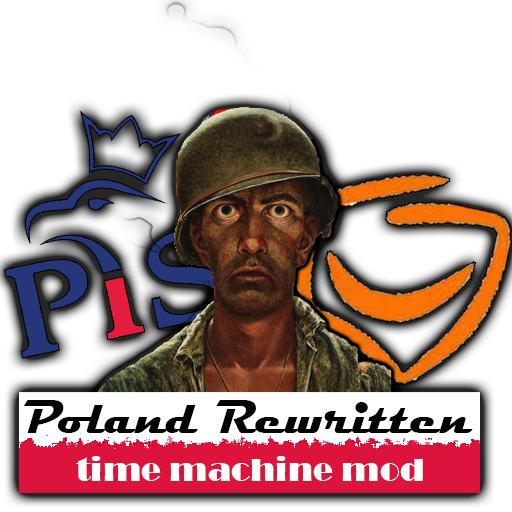
<style>
.page{position:relative;width:512px;height:512px;background:#ffffff}
.page>*{position:absolute;margin:0}
.t1{font:47.5px "Magneto-Bold";color:#000000}
.t2{font:33.3px "Broadway";color:#ffffff}
</style>
<div class="page">
<p class="t1" style="left:24px;top:400px;width:449px;height:33px">Poland Rewritten</p>
<p class="t2" style="left:76px;top:456px;width:347px;height:25px">time machine mod</p>
</div>
